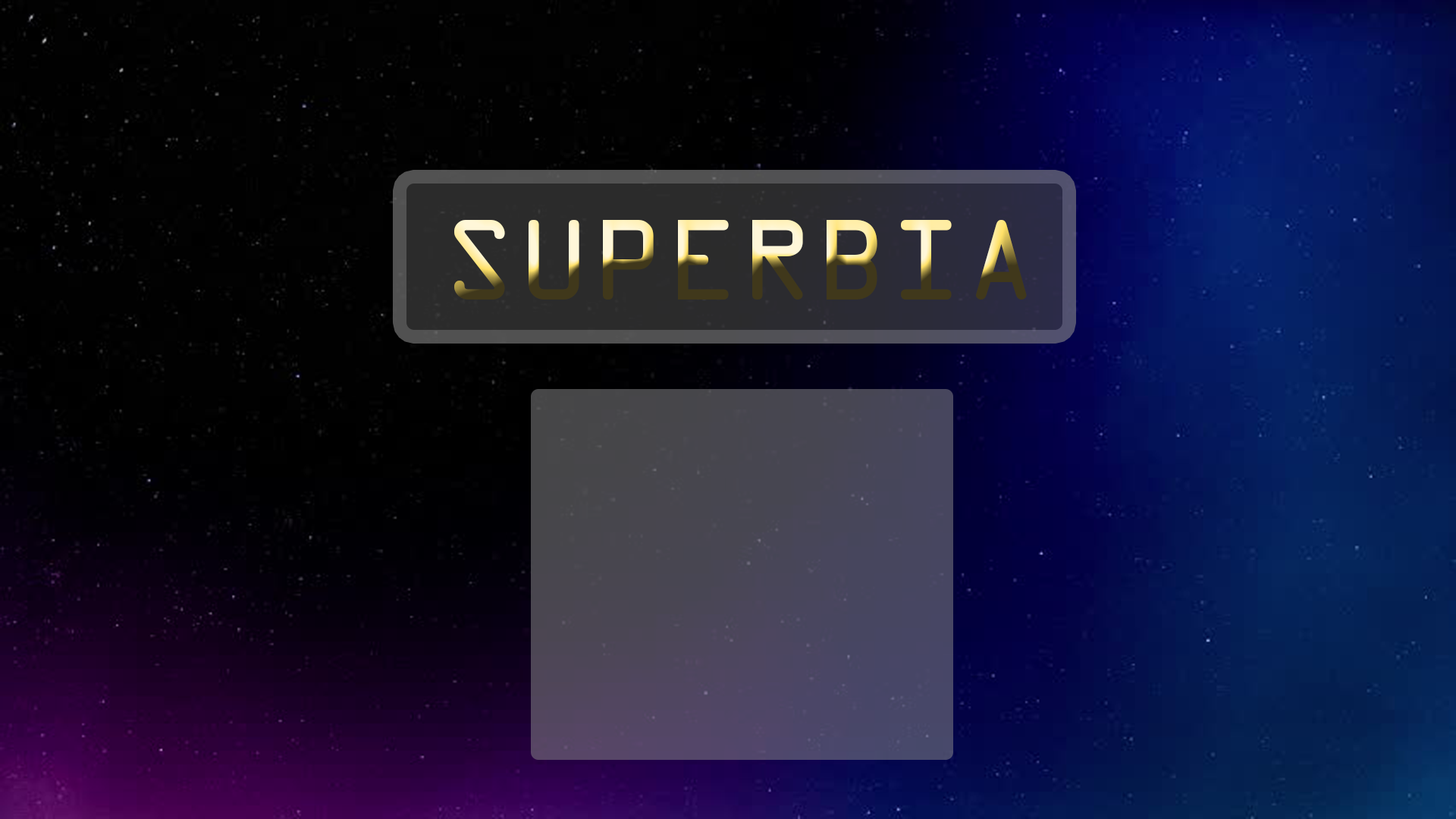
<style>
.page{position:relative;width:1456px;height:819px}
.page>*{position:absolute;margin:0}
.t1{font:175.1px "OCRAStd";letter-spacing:0.01em}
</style>
<div class="page">
<p class="t1" style="left:454px;top:220px;width:573px;height:80px">SUPERBIA</p>
</div>
